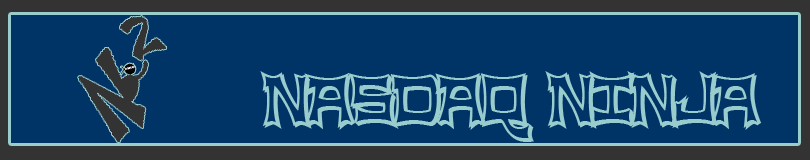
<style>
.page{position:relative;width:810px;height:160px;background:#003366}
.page>*{position:absolute;margin:0}
.t1{font:60px "NinjaLine";color:#99cccc}
</style>
<div class="page">
<p class="t1" style="left:260px;top:71px;width:502px;height:71px">nasdaq ninja</p>
</div>
